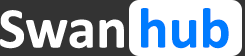
<style>
.page{position:relative;width:245px;height:56px;background:#ffffff}
.page>*{position:absolute;margin:0}
.t1{font:57.8px "Calibri-Bold";color:#ffffff}
.t2{font:57.8px "Calibri-Bold";color:#007bff}
</style>
<div class="page">
<p class="t1" style="left:0px;top:10px;width:124px;height:39px">Swan</p>
<p class="t2" style="left:141px;top:8px;width:88px;height:41px">hub</p>
</div>
